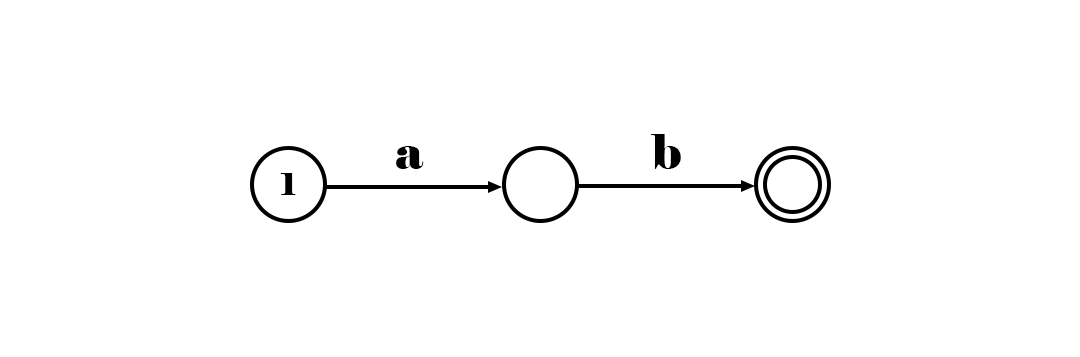
<style>
.page{position:relative;width:1080px;height:357px;background:#ffffff}
.page>*{position:absolute;margin:0}
.t1{font:48px "Elephant-Regular";color:#000000}
.t2{font:30px "Elephant-Regular";color:#000000}
</style>
<div class="page">
<p class="t1" style="left:651px;top:134px;width:30px;height:35px">b</p>
<p class="t1" style="left:396px;top:146px;width:28px;height:23px">a</p>
<p class="t2" style="left:280px;top:173px;width:16px;height:22px">1</p>
</div>
